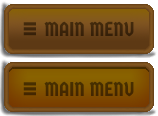
<style>
.page{position:relative;width:158px;height:116px}
.page>*{position:absolute;margin:0}
.t1{font:30px "FranklinGothic-DemiCond";color:#3d250c}
.t2{font:20px "GermaniaOne-Regular";color:#3d250c}
.t3{font:30px "FranklinGothic-DemiCond";color:#452b00}
.t4{font:20px "GermaniaOne-Regular";color:#452b00}
</style>
<div class="page">
<p class="t1" style="left:23px;top:22px;width:13px;height:14px">≡</p>
<p class="t2" style="left:44px;top:21px;width:90px;height:16px">MAIN MENU</p>
<p class="t3" style="left:23px;top:82px;width:13px;height:14px">≡</p>
<p class="t4" style="left:44px;top:81px;width:90px;height:16px">MAIN MENU</p>
</div>
